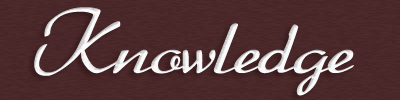
<style>
.page{position:relative;width:400px;height:100px}
.page>*{position:absolute;margin:0}
.t1{font:66px "Heather";color:#f8f8f8}
</style>
<div class="page">
<p class="t1" style="left:34px;top:7px;width:320px;height:89px">Knowledge</p>
</div>
